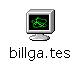
<style>
.page{position:relative;width:80px;height:80px;background:#ffffff}
.page>*{position:absolute;margin:0}
.t1{font:14px "MSReferenceSansSerif";color:#000000}
</style>
<div class="page">
<p class="t1" style="left:10px;top:47px;width:60px;height:14px">billga.tes</p>
</div>
